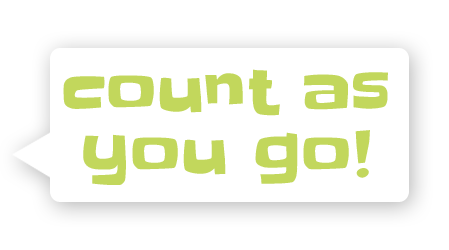
<style>
.page{position:relative;width:449px;height:250px;background:#ffffff}
.page>*{position:absolute;margin:0}
.t1{font:62.5px/62.1px "Slackey";color:#c2d75c}
</style>
<div class="page">
<p class="t1" style="left:63px;top:69px;width:325px;height:116px;text-align:center">count as<br>you go!</p>
</div>
